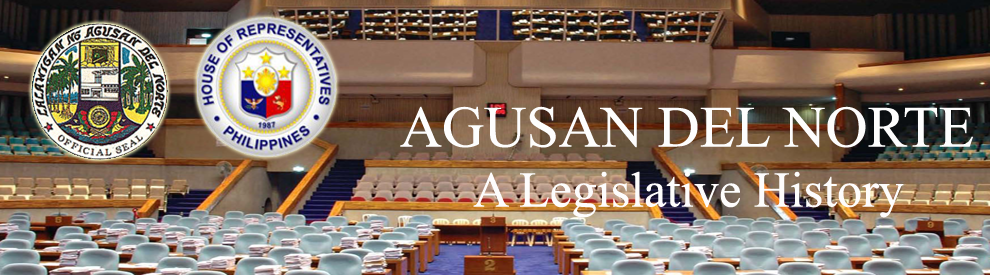
<style>
.page{position:relative;width:990px;height:275px}
.page>*{position:absolute;margin:0}
.t1{font:50px "TimesNewRomanPSMT";color:#fdfcfc}
.t2{font:58.3px "TimesNewRomanPSMT";color:#fdfdfd}
</style>
<div class="page">
<p class="t1" style="left:400px;top:106px;width:573px;height:112px;text-align:center"><span class="t2">AGUSAN DEL NORTE<br></span>A Legislative History</p>
</div>
